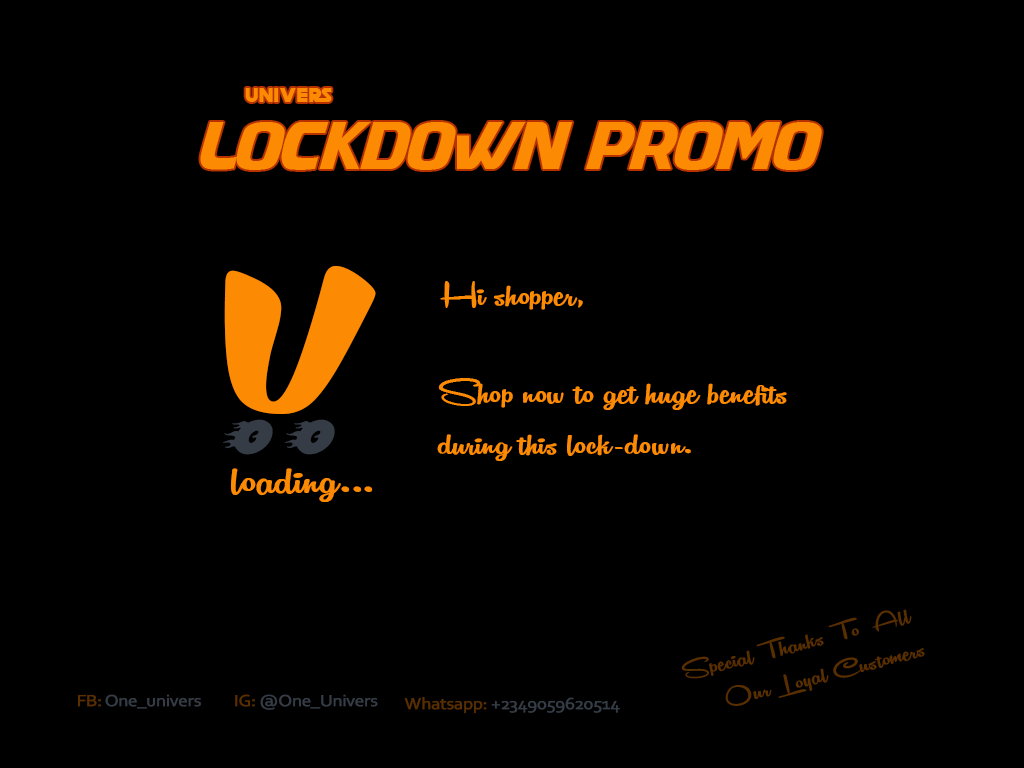
<style>
.page{position:relative;width:1024px;height:768px;background:#000000}
.page>*{position:absolute;margin:0}
.t1{font:20px "DeathStar";letter-spacing:0.06em;color:#fc8a03}
.t2{font:63px "Masque";letter-spacing:-0.04em;color:#fc8a03;scale:0.95 1}
.t3{font:124.8px "KomikaBoogie";letter-spacing:0.02em;color:#fc8a03;scale:1.66 1}
.t4{font:40.9px "RemachineScriptPersonalUse";color:#fc8a03;scale:1.26 1}
.t5{font:60.8px "Blazed";letter-spacing:0.3em;color:#353c45}
.t6{font:52.5px "RemachineScriptPersonalUse";color:#fc8a03;scale:1.27 1}
.t7{font:28.5px "RemachineScriptPersonalUse";color:#572f01;scale:1.26 1}
.t8{font:17.1px "Corbel";letter-spacing:-0.04em;color:#353c45;font-weight:bold;scale:1.11 1}
.t9{font:17.1px "Corbel";letter-spacing:-0.04em;color:#572f01;font-weight:bold;scale:1.11 1}
</style>
<div class="page">
<p class="t1" style="left:245px;top:88px;width:87px;height:14px">Univers</p>
<p class="t2" style="left:200px;top:122px;width:622px;height:48px">LOCKDOWN PROMO</p>
<p class="t3" style="left:224px;top:266px;width:152px;height:148px">U</p>
<p class="t4" style="left:440px;top:281px;width:143px;height:29px">Hi shopper,</p>
<p class="t4" style="left:437px;top:378px;width:350px;height:83px">Shop now to get huge benefits<br>during this lock-down.</p>
<p class="t5" style="left:223px;top:419px;width:112px;height:36px">oo</p>
<p class="t6" style="left:230px;top:468px;width:143px;height:34px">loading...</p>
<p class="t7" style="left:681px;top:609px;width:244px;height:97px;text-align:right;rotate:-14deg">Special Thanks To  All <br>Our Loyal Customers</p>
<p class="t8" style="left:77px;top:694px;width:124px;height:15px"><span class="t9">FB: </span>One_univers</p>
<p class="t8" style="left:235px;top:694px;width:143px;height:16px"><span class="t9">IG: </span>@One_Univers</p>
<p class="t8" style="left:404px;top:696px;width:216px;height:18px"><span class="t9">Whatsapp: </span>+2349059620514</p>
</div>
